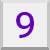
<style>
.page{position:relative;width:50px;height:50px;background:#f0f0f0}
.page>*{position:absolute;margin:0}
.t1{font:36px "RobotoFlex-Medium";color:#6900ba}
</style>
<div class="page">
<p class="t1" style="left:16px;top:12px;width:18px;height:26px">9</p>
</div>
